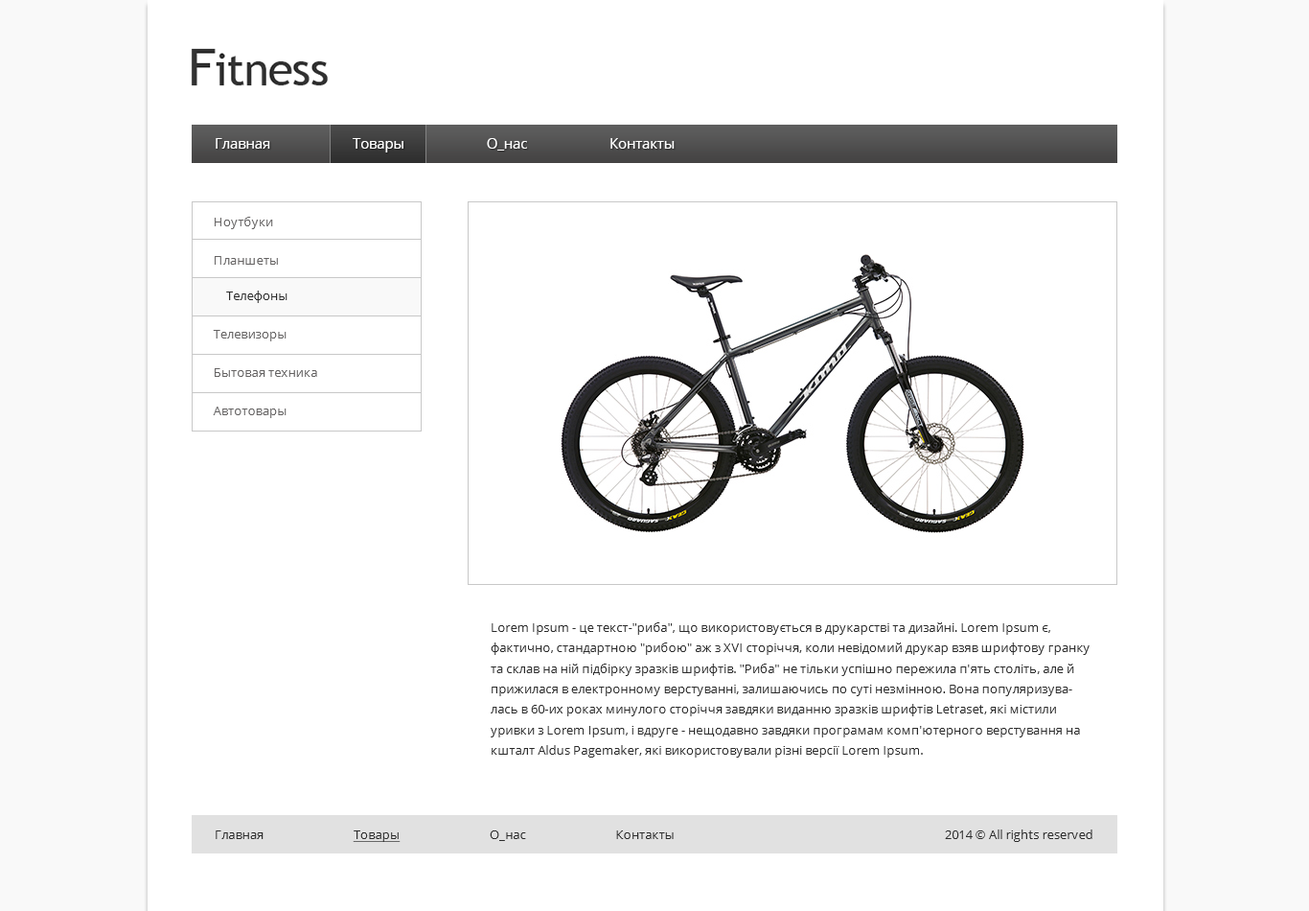
<style>
.page{position:relative;width:1309px;height:911px;background:#ffffff}
.page>*{position:absolute;margin:0}
.t1{font:14.1px "OpenSans";color:#ffffff}
.t2{font:12.8px/35.8px "OpenSans";color:#656363}
.t3{font:12.8px/35.8px "OpenSans";color:#2c2c2c}
.t4{font:12.8px/20.4px "OpenSans";color:#2c2c2c}
.t5{font:12.8px "OpenSans";color:#2c2c2c}
.t6{font:12.8px "OpenSans";color:#2c2c2c;text-decoration:underline}
</style>
<div class="page">
<p class="t1" style="left:216px;top:138px;width:459px;height:14px">Главная Товары О_нас Контакты</p>
<p class="t2" style="left:213px;top:217px;width:104px;height:201px">Ноутбуки<br>Планшеты<br><span class="t3">Телефоны<br></span>Телевизоры<br>Бытовая техника<br>Автотовары</p>
<p class="t4" style="left:491px;top:622px;width:599px;height:135px">Lorem Ipsum - це текст-"риба", що використовується в друкарстві та дизайні. Lorem Ipsum є, фактично, стандартною "рибою" аж з XVI сторіччя, коли невідомий друкар взяв шрифтову гранку та склав на ній підбірку зразків шрифтів. "Риба" не тільки успішно пережила п'ять століть, але й прижилася в електронному верстуванні, залишаючись по суті незмінною. Вона популяризувалась в 60-их роках минулого сторіччя завдяки виданню зразків шрифтів Letraset, які містили уривки з Lorem Ipsum, і вдруге - нещодавно завдяки програмам комп'ютерного верстування на кшталт Aldus Pagemaker, які використовували різні версії Lorem Ipsum.</p>
<p class="t5" style="left:216px;top:830px;width:458px;height:12px">Главная <span class="t6">Товары</span> О_нас Контакты</p>
<p class="t5" style="left:945px;top:829px;width:148px;height:13px">2014 © All rights reserved</p>
</div>
